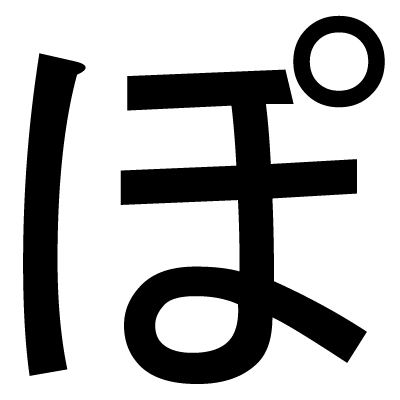
<style>
.page{position:relative;width:400px;height:400px;background:#ffffff}
.page>*{position:absolute;margin:0}
.t1{font:416.7px "MS-PGothic";color:#000000}
</style>
<div class="page">
<p class="t1" style="left:23px;top:15px;width:362px;height:369px">ぽ</p>
</div>
